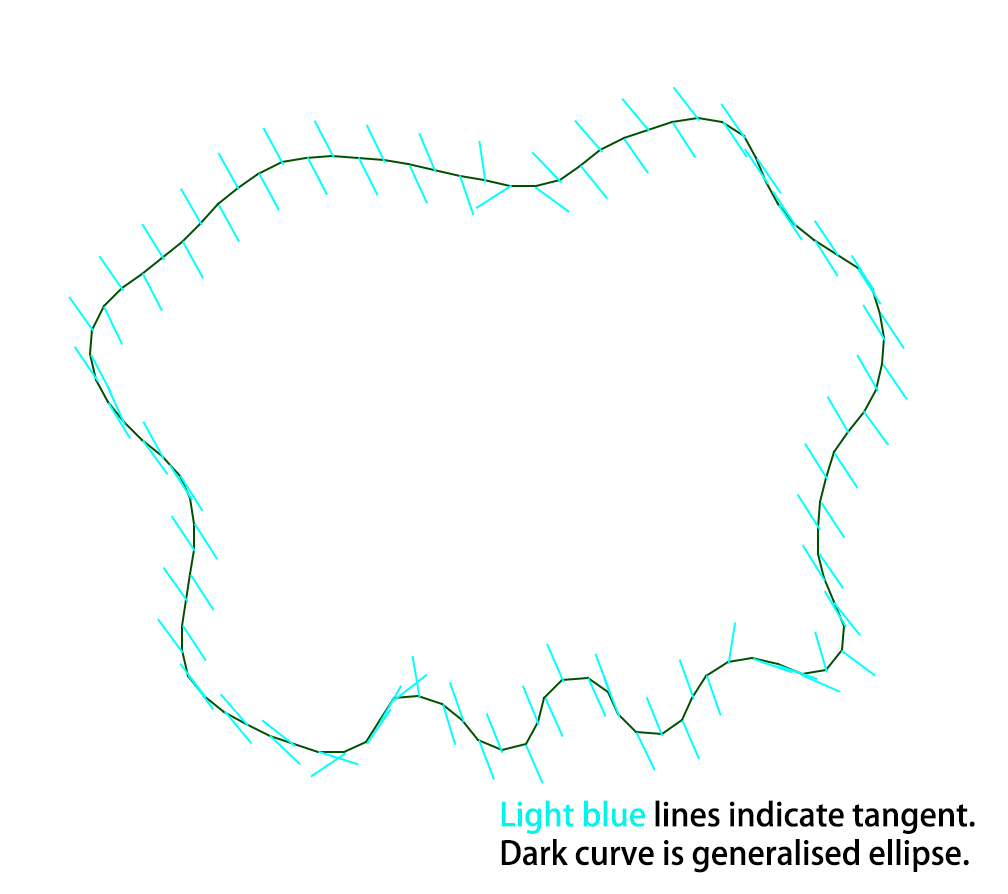
<style>
.page{position:relative;width:1008px;height:894px;background:#ffffff}
.page>*{position:absolute;margin:0}
.t1{font:32px "AdobeFanHeitiStd-Bold";color:#000000}
.t2{font:32px "AdobeFanHeitiStd-Bold";color:#00f6ed}
</style>
<div class="page">
<p class="t1" style="left:501px;top:800px;width:474px;height:73px"><span class="t2">Light blue</span> lines indicate tangent.<br>Dark curve is generalised ellipse.</p>
</div>
